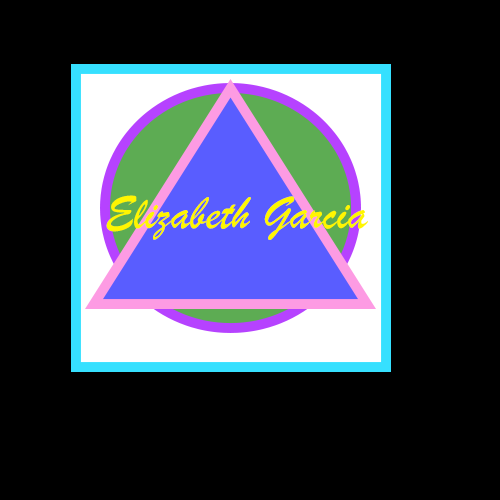
<style>
.page{position:relative;width:500px;height:500px;background:#000000}
.page>*{position:absolute;margin:0}
.t1{font:48px "BrushScriptMT";color:#fff600}
</style>
<div class="page">
<p class="t1" style="left:106px;top:195px;width:262px;height:45px">Elizabeth Garcia</p>
</div>
